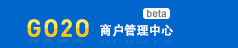
<style>
.page{position:relative;width:238px;height:48px;background:#0066cc}
.page>*{position:absolute;margin:0}
.t1{font:10.5px "ArialMT";color:#797979;font-weight:bold;scale:0.95 1}
.t2{font:24px "DINAlternate-Bold";letter-spacing:0.075em;font-weight:bold}
.t3{font:12.6px "STHeitiSC-Medium";color:#ffffff;font-weight:bold;scale:0.95 1}
</style>
<div class="page">
<p class="t1" style="left:147px;top:9px;width:20px;height:9px">beta</p>
<p class="t2" style="left:27px;top:19px;width:62px;height:18px">GO2O</p>
<p class="t3" style="left:100px;top:24px;width:73px;height:13px">商户管理中心</p>
</div>
